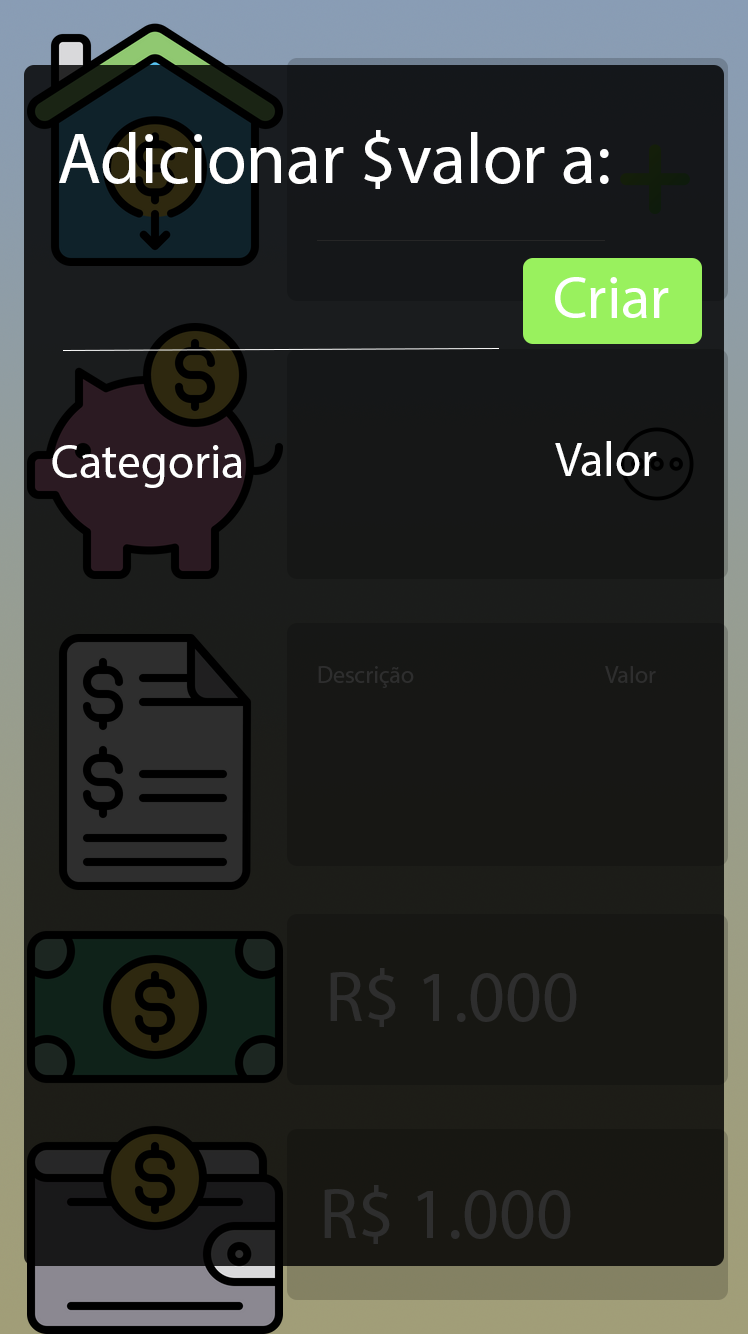
<style>
.page{position:relative;width:750px;height:1334px}
.page>*{position:absolute;margin:0}
.t1{font:72px "MyriadPro-Regular";color:#ffffff}
.t2{font:60px "MyriadPro-Regular";color:#ffffff}
.t3{font:48px "MyriadPro-Regular";color:#ffffff}
.t4{font:24px "MyriadPro-Regular";color:#2e2e2e}
.t5{font:72px "MyriadPro-Regular";color:#2e2e2e}
</style>
<div class="page">
<p class="t1" style="left:59px;top:130px;width:550px;height:59px">Adicionar $valor a:</p>
<p class="t2" style="left:555px;top:277px;width:114px;height:41px">Criar</p>
<p class="t3" style="left:52px;top:445px;width:190px;height:43px">Categoria</p>
<p class="t3" style="left:555px;top:441px;width:102px;height:35px">Valor</p>
<p class="t4" style="left:318px;top:666px;width:96px;height:22px">Descrição</p>
<p class="t4" style="left:605px;top:666px;width:51px;height:17px">Valor</p>
<p class="t5" style="left:330px;top:968px;width:247px;height:59px">R$ 1.000</p>
<p class="t5" style="left:324px;top:1185px;width:247px;height:59px">R$ 1.000</p>
</div>
